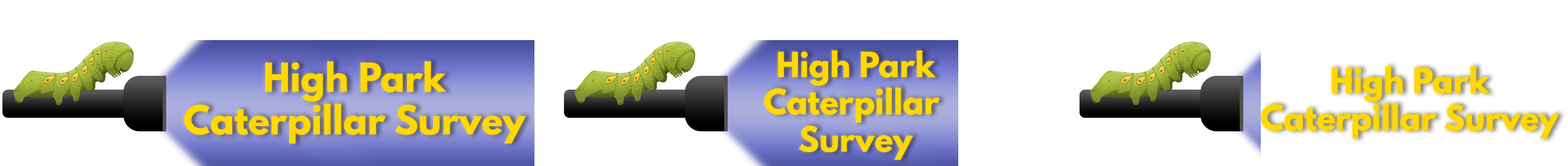
<style>
.page{position:relative;width:1568px;height:166px;background:#ffffff}
.page>*{position:absolute;margin:0}
.t1{font:31px "LeagueSpartan-Bold";color:#ffd800}
.t2{font:35.5px "LeagueSpartan-Bold";color:#ffd800}
</style>
<div class="page">
<p class="t1" style="left:764px;top:50px;width:176px;height:110px;text-align:center">High Park<br>Caterpillar <br>Survey</p>
<p class="t2" style="left:184px;top:61px;width:342px;height:82px;text-align:center">High Park<br>Caterpillar Survey</p>
<p class="t1" style="left:1261px;top:66px;width:298px;height:72px;text-align:center">High Park<br>Caterpillar Survey</p>
</div>
